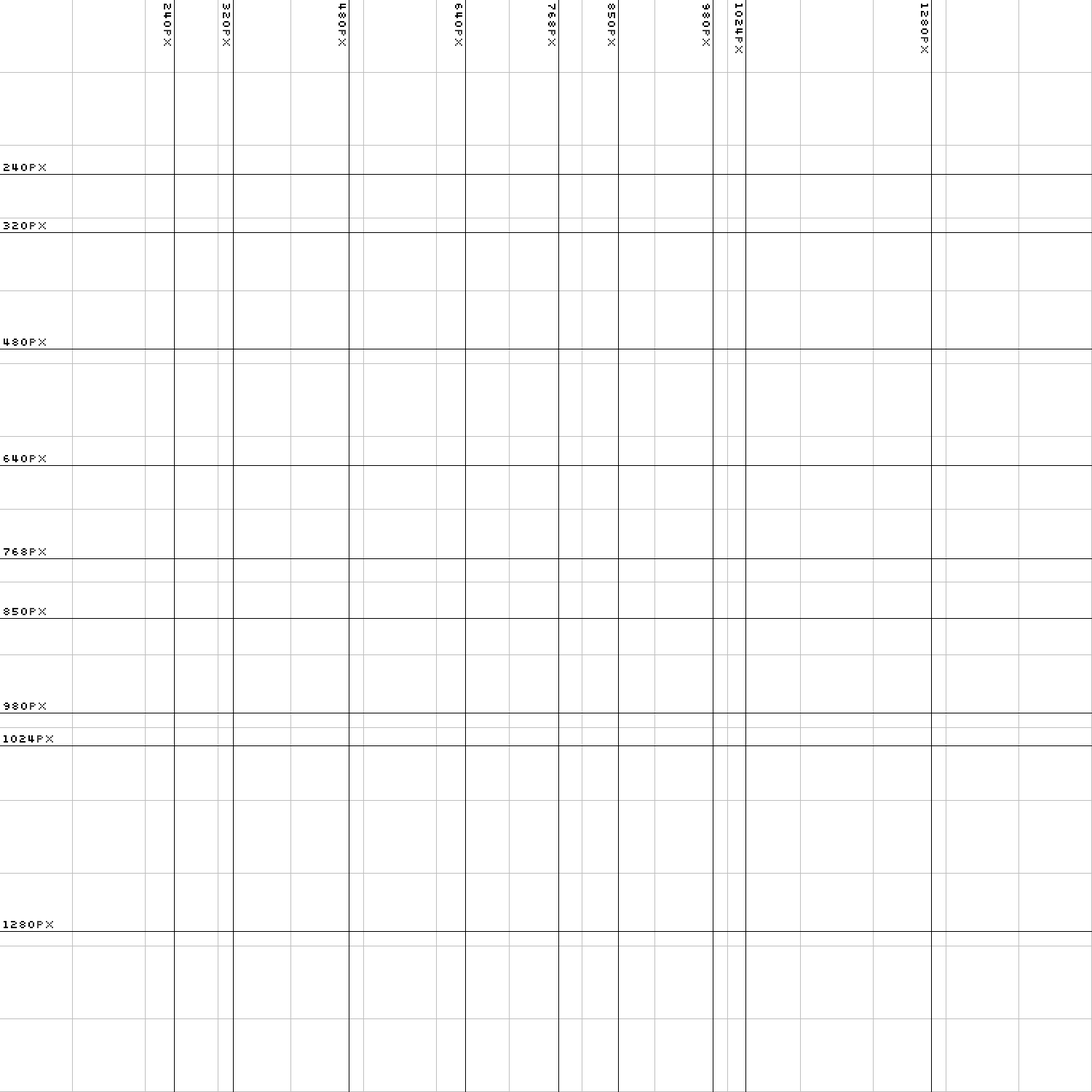
<style>
.page{position:relative;width:1092px;height:1092px;background:#ffffff}
.page>*{position:absolute;margin:0}
.t1{font:12.4px "Silkscreen";color:#000000}
.t2{font:12.4px "Silkscreen";color:#404040}
</style>
<div class="page">
<p class="t1" style="left:164px;top:4px;width:7px;height:42px;rotate:90deg">240<span class="t2">px</span></p>
<p class="t1" style="left:223px;top:4px;width:7px;height:42px;rotate:90deg">320<span class="t2">px</span></p>
<p class="t1" style="left:339px;top:4px;width:7px;height:42px;rotate:90deg">480<span class="t2">px</span></p>
<p class="t1" style="left:455px;top:4px;width:7px;height:42px;rotate:90deg">640<span class="t2">px</span></p>
<p class="t1" style="left:548px;top:4px;width:7px;height:42px;rotate:90deg">768<span class="t2">px</span></p>
<p class="t1" style="left:608px;top:4px;width:7px;height:42px;rotate:90deg">850<span class="t2">px</span></p>
<p class="t1" style="left:703px;top:4px;width:7px;height:42px;rotate:90deg">980<span class="t2">px</span></p>
<p class="t1" style="left:735px;top:4px;width:8px;height:49px;rotate:90deg">1024<span class="t2">px</span></p>
<p class="t1" style="left:921px;top:4px;width:7px;height:49px;rotate:90deg">1280<span class="t2">px</span></p>
<p class="t1" style="left:4px;top:164px;width:42px;height:7px">240<span class="t2">px</span></p>
<p class="t1" style="left:4px;top:222px;width:42px;height:7px">320<span class="t2">px</span></p>
<p class="t1" style="left:4px;top:339px;width:42px;height:7px">480<span class="t2">px</span></p>
<p class="t1" style="left:4px;top:455px;width:42px;height:7px">640<span class="t2">px</span></p>
<p class="t1" style="left:4px;top:548px;width:42px;height:7px">768<span class="t2">px</span></p>
<p class="t1" style="left:4px;top:608px;width:42px;height:7px">850<span class="t2">px</span></p>
<p class="t1" style="left:4px;top:703px;width:42px;height:7px">980<span class="t2">px</span></p>
<p class="t1" style="left:4px;top:735px;width:49px;height:8px">1024<span class="t2">px</span></p>
<p class="t1" style="left:4px;top:921px;width:49px;height:7px">1280<span class="t2">px</span></p>
</div>
